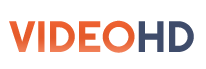
<style>
.page{position:relative;width:206px;height:69px;background:#ffffff}
.page>*{position:absolute;margin:0}
.t1{font:44px "Righteous-Regular";color:#ea6030}
.t2{font:44px "Righteous-Regular";color:#555555}
</style>
<div class="page">
<p class="t1" style="left:9px;top:20px;width:126px;height:33px">VIDEO</p>
<p class="t2" style="left:138px;top:21px;width:56px;height:31px">HD</p>
</div>
